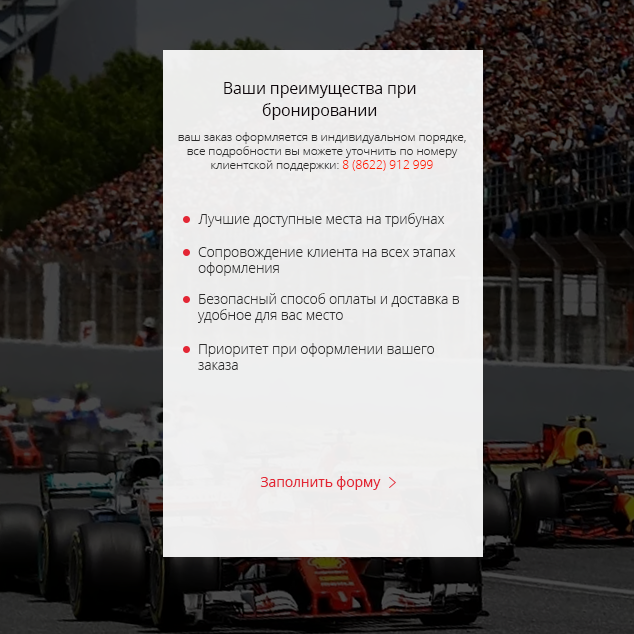
<style>
.page{position:relative;width:634px;height:634px}
.page>*{position:absolute;margin:0}
.t1{font:16px/22px "OpenSans";letter-spacing:-0.01em;color:#0e060a}
.t2{font:12px/14px "OpenSans-Light";letter-spacing:-0.01em;color:#2c2c2c}
.t3{font:12px/14px "OpenSans-Light";color:#ff1e00}
.t4{font:14px "OpenSans-Light";letter-spacing:-0.01em;color:#2c2c2c}
.t5{font:14px/16px "OpenSans-Light";letter-spacing:-0.01em;color:#2c2c2c}
.t6{font:14px "OpenSans";letter-spacing:-0.01em;color:#e32634}
</style>
<div class="page">
<p class="t1" style="left:224px;top:82px;width:192px;height:38px;text-align:center">Ваши преимущества при <br>бронировании</p>
<p class="t2" style="left:178px;top:132px;width:288px;height:40px;text-align:center">ваш заказ оформляется в индивидуальном порядке, все подробности вы можете уточнить по номеру клиентской поддержки: <span class="t3">8 (8622) 912 999</span></p>
<p class="t4" style="left:198px;top:213px;width:247px;height:14px">Лучшие доступные места на трибунах</p>
<p class="t5" style="left:198px;top:247px;width:258px;height:29px">Сопровождение клиента на всех этапах <br>оформления</p>
<p class="t5" style="left:198px;top:293px;width:261px;height:30px">Безопасный способ оплаты и доставка в<br>удобное для вас место</p>
<p class="t5" style="left:198px;top:343px;width:236px;height:27px">Приоритет при оформлении вашего <br>заказа</p>
<p class="t6" style="left:260px;top:476px;width:121px;height:14px">Заполнить форму</p>
</div>
